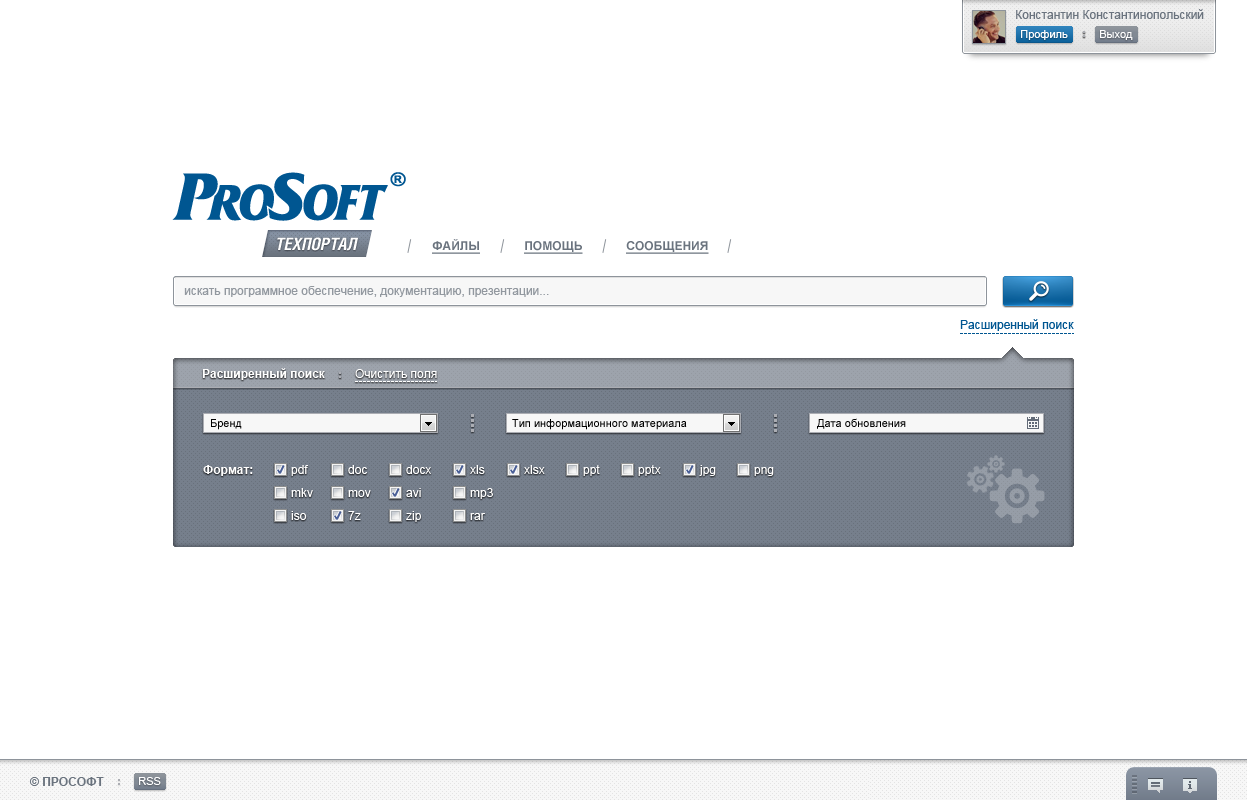
<style>
.page{position:relative;width:1247px;height:800px;background:#ffffff}
.page>*{position:absolute;margin:0}
.t1{font:12px "ArialMT";color:#6a737e}
.t2{font:11px "ArialMT";color:#fefeff}
.t3{font:17px "HeliosCond-Bold-Italic";color:#fefefe;text-transform:uppercase}
.t4{font:12px "Arial-BoldMT";color:#6a737e;text-transform:uppercase;text-decoration:underline}
.t5{font:12px "ArialMT";color:#92989f}
.t6{font:12px "ArialMT";color:#005691}
.t7{font:12px "Arial-BoldMT";color:#ffffff}
.t8{font:12px "ArialMT";color:#ffffff}
.t9{font:11px "ArialMT";color:#000000}
.t10{font:12px "Arial-BoldMT";color:#6a737e}
</style>
<div class="page">
<p class="t1" style="left:1016px;top:9px;width:188px;height:10px">Константин Константинопольский</p>
<p class="t2" style="left:1021px;top:30px;width:47px;height:10px">Профиль</p>
<p class="t2" style="left:1100px;top:30px;width:33px;height:10px">Выход</p>
<p class="t3" style="left:277px;top:237px;width:81px;height:14px">ТЕХПОРТАЛ</p>
<p class="t4" style="left:432px;top:239px;width:48px;height:15px">Файлы</p>
<p class="t4" style="left:524px;top:241px;width:59px;height:13px">помощь</p>
<p class="t4" style="left:626px;top:241px;width:83px;height:13px">Сообщения</p>
<p class="t5" style="left:184px;top:286px;width:365px;height:11px">искать программное обеспечение, документацию, презентации...</p>
<p class="t6" style="left:960px;top:319px;width:114px;height:12px">Расширенный поиск</p>
<p class="t7" style="left:202px;top:368px;width:123px;height:12px">Расширенный поиск</p>
<p class="t8" style="left:355px;top:369px;width:82px;height:9px">Очистить поля</p>
<p class="t9" style="left:211px;top:419px;width:31px;height:11px">Бренд</p>
<p class="t9" style="left:512px;top:419px;width:175px;height:11px">Тип информационного материала</p>
<p class="t9" style="left:817px;top:418px;width:89px;height:11px">Дата обновления</p>
<p class="t7" style="left:203px;top:465px;width:50px;height:11px">Формат:</p>
<p class="t8" style="left:291px;top:465px;width:18px;height:11px">pdf</p>
<p class="t8" style="left:348px;top:465px;width:19px;height:9px">doc</p>
<p class="t8" style="left:406px;top:465px;width:25px;height:9px">docx</p>
<p class="t8" style="left:470px;top:465px;width:15px;height:9px">xls</p>
<p class="t8" style="left:524px;top:465px;width:21px;height:9px">xlsx</p>
<p class="t8" style="left:583px;top:465px;width:17px;height:11px">ppt</p>
<p class="t8" style="left:638px;top:465px;width:23px;height:11px">pptx</p>
<p class="t8" style="left:699px;top:465px;width:17px;height:11px">jpg</p>
<p class="t8" style="left:754px;top:467px;width:20px;height:9px">png</p>
<p class="t8" style="left:291px;top:488px;width:22px;height:9px">mkv</p>
<p class="t8" style="left:348px;top:490px;width:23px;height:7px">mov</p>
<p class="t8" style="left:406px;top:488px;width:15px;height:9px">avi</p>
<p class="t8" style="left:470px;top:488px;width:23px;height:11px">mp3</p>
<p class="t8" style="left:291px;top:511px;width:16px;height:9px">iso</p>
<p class="t8" style="left:348px;top:511px;width:13px;height:9px">7z</p>
<p class="t8" style="left:406px;top:511px;width:15px;height:11px">zip</p>
<p class="t8" style="left:470px;top:513px;width:15px;height:7px">rar</p>
<p class="t10" style="left:29px;top:777px;width:75px;height:9px">© ПРОСОФТ</p>
<p class="t2" style="left:139px;top:777px;width:22px;height:8px">RSS</p>
</div>
